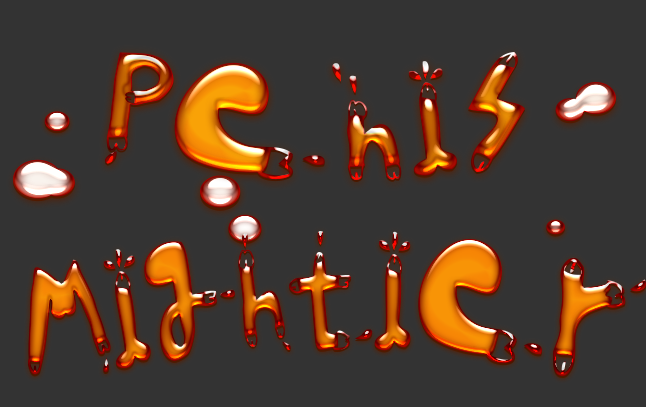
<style>
.page{position:relative;width:646px;height:407px;background:#333333}
.page>*{position:absolute;margin:0}
.t1{font:114.2px "woodcutterPOLLITAALEGRE";letter-spacing:-0.025em}
.t2{font:118.9px "woodcutterPOLLITAALEGRE";letter-spacing:-0.025em;scale:0.83 1}
</style>
<div class="page">
<p class="t1" style="left:104px;top:52px;width:422px;height:128px">Penis</p>
<p class="t1" style="left:104px;top:52px;width:422px;height:128px">Penis</p>
<p class="t2" style="left:28px;top:231px;width:619px;height:145px">Mightier</p>
<p class="t2" style="left:28px;top:231px;width:619px;height:145px">Mightier</p>
</div>
